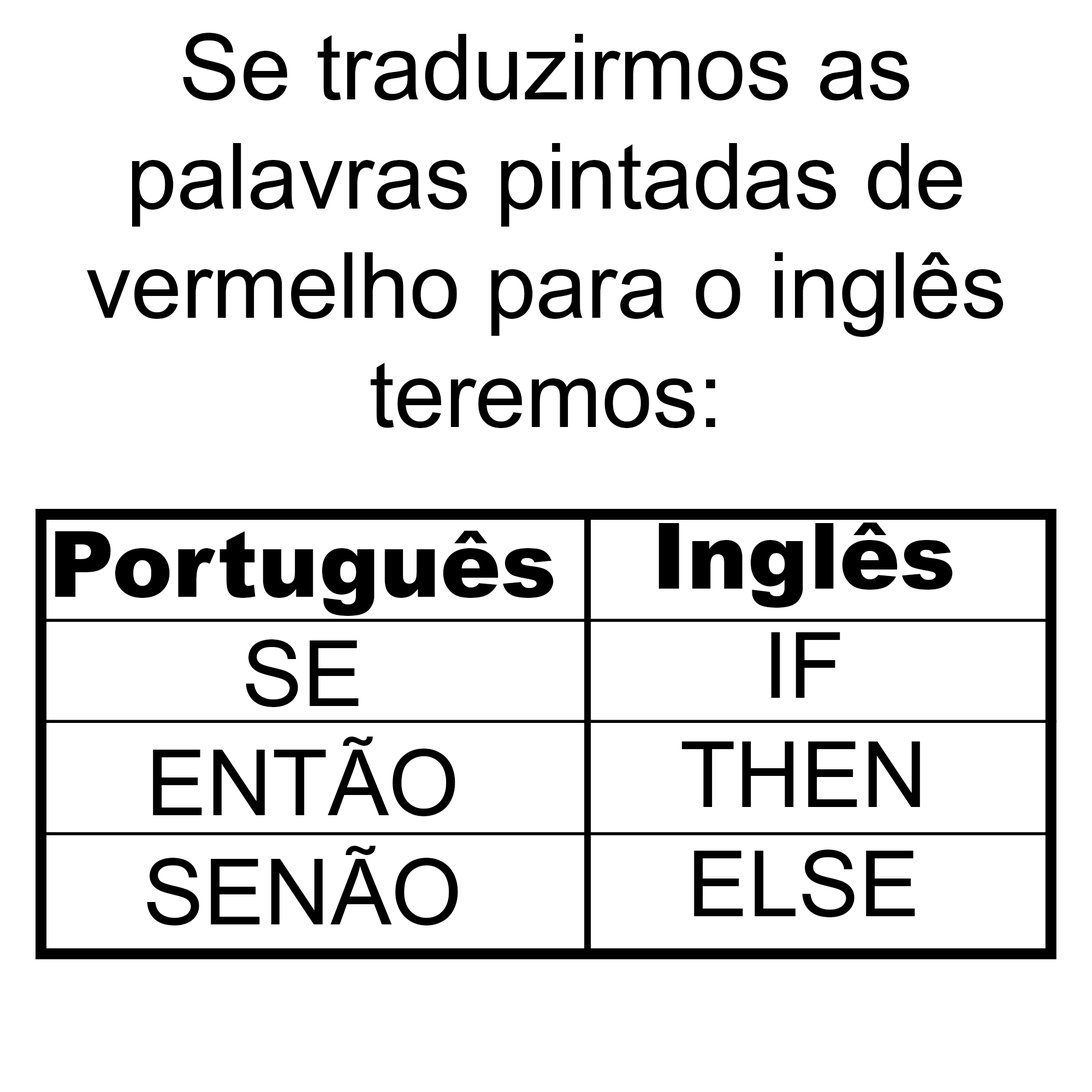
<style>
.page{position:relative;width:1092px;height:1092px;background:#ffffff}
.page>*{position:absolute;margin:0}
.t1{font:91px "ArialMT";color:#000000}
.t2{font:91px "Arial-Black";color:#000000}
</style>
<div class="page">
<p class="t1" style="left:87px;top:33px;width:917px;height:395px;text-align:center">Se traduzirmos as<br>palavras pintadas de<br>vermelho para o inglês<br>teremos:</p>
<p class="t1" style="left:55px;top:531px;width:499px;height:394px;text-align:center"><span class="t2">Português<br></span>SE<br>ENTÃO<br>SENÃO</p>
<p class="t1" style="left:658px;top:523px;width:295px;height:394px;text-align:center"><span class="t2">Inglês<br></span>IF<br>THEN<br>ELSE</p>
</div>
